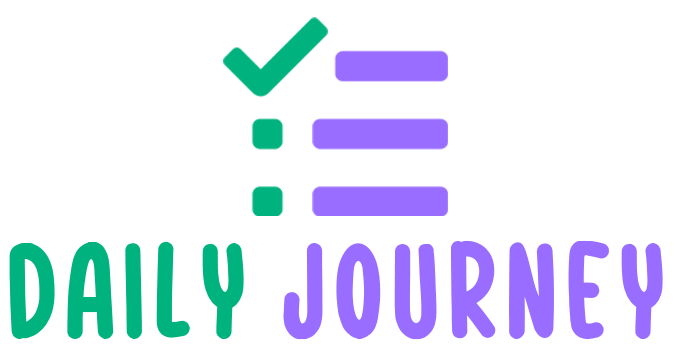
<style>
.page{position:relative;width:679px;height:363px;background:#ffffff}
.page>*{position:absolute;margin:0}
.t1{font:126.4px "Watermelon-Days";letter-spacing:0.06em;color:#996dff}
.t2{font:126.4px "Watermelon-Days";letter-spacing:0.06em;color:#00b37e}
</style>
<div class="page">
<p class="t1" style="left:9px;top:240px;width:654px;height:100px"><span class="t2">Daily </span>Journey</p>
</div>
